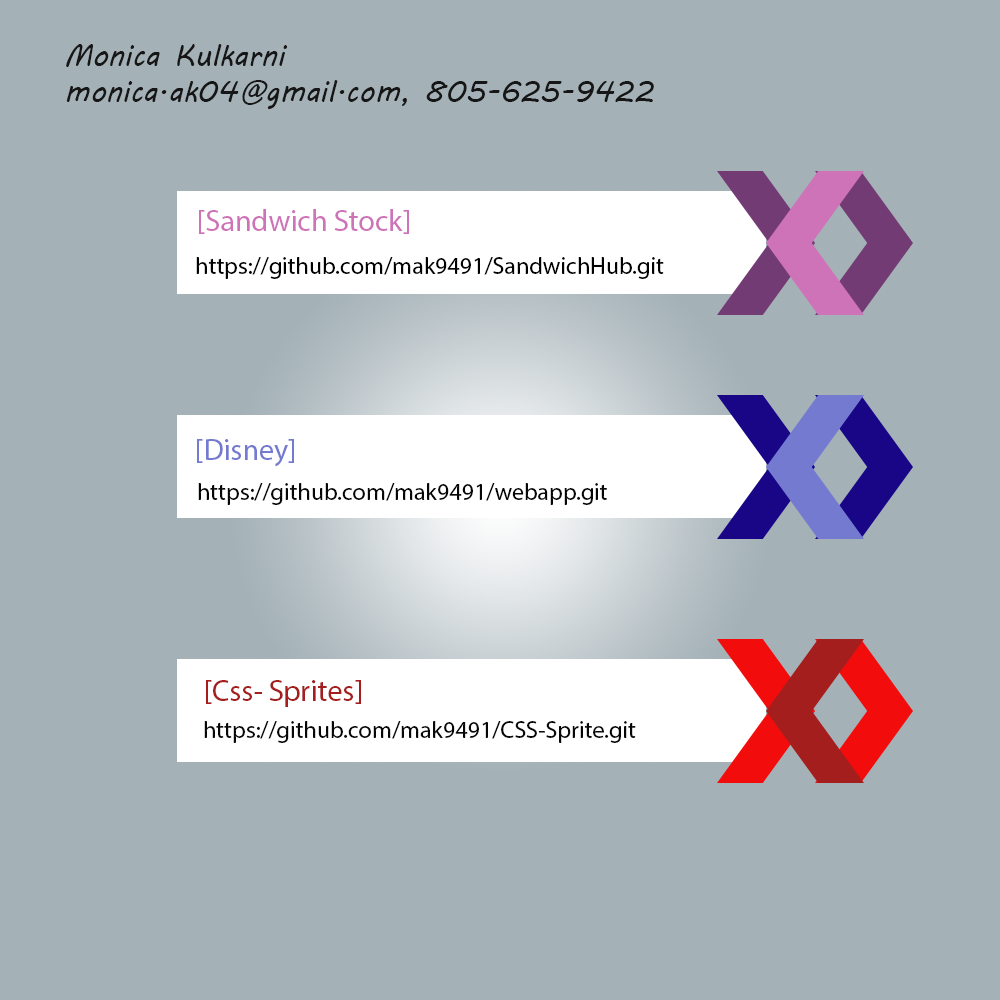
<style>
.page{position:relative;width:1000px;height:1000px;background:#a4b1b7}
.page>*{position:absolute;margin:0}
.t1{font:30px "MVBoli";color:#161616}
.t2{font:30px "MyriadPro-Regular";color:#cf73b8}
.t3{font:24px "MyriadPro-Regular";color:#000000}
.t4{font:30px "MyriadPro-Regular";color:#737acf}
.t5{font:24px "MyriadPro-Regular";color:#060606}
.t6{font:30px "MyriadPro-Regular";color:#a51e1e}
.t7{font:24px "MyriadPro-Regular";color:#070707}
</style>
<div class="page">
<p class="t1" style="left:66px;top:44px;width:588px;height:65px">Monica Kulkarni<br>monica.ak04@gmail.com, 805-625-9422</p>
<p class="t2" style="left:199px;top:209px;width:210px;height:25px">[Sandwich Stock]</p>
<p class="t3" style="left:196px;top:257px;width:468px;height:22px">https://github.com/mak9491/SandwichHub.git</p>
<p class="t4" style="left:197px;top:439px;width:97px;height:28px">[Disney]</p>
<p class="t5" style="left:198px;top:483px;width:409px;height:22px">https://github.com/mak9491/webapp.git</p>
<p class="t6" style="left:206px;top:680px;width:155px;height:27px">[Css- Sprites]</p>
<p class="t7" style="left:204px;top:721px;width:432px;height:22px">https://github.com/mak9491/CSS-Sprite.git</p>
</div>
